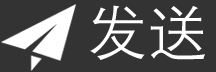
<style>
.page{position:relative;width:216px;height:72px;background:#333333}
.page>*{position:absolute;margin:0}
.t1{font:60px "DengXian-Regular";color:#ffffff}
</style>
<div class="page">
<p class="t1" style="left:90px;top:5px;width:115px;height:55px">发送</p>
</div>
